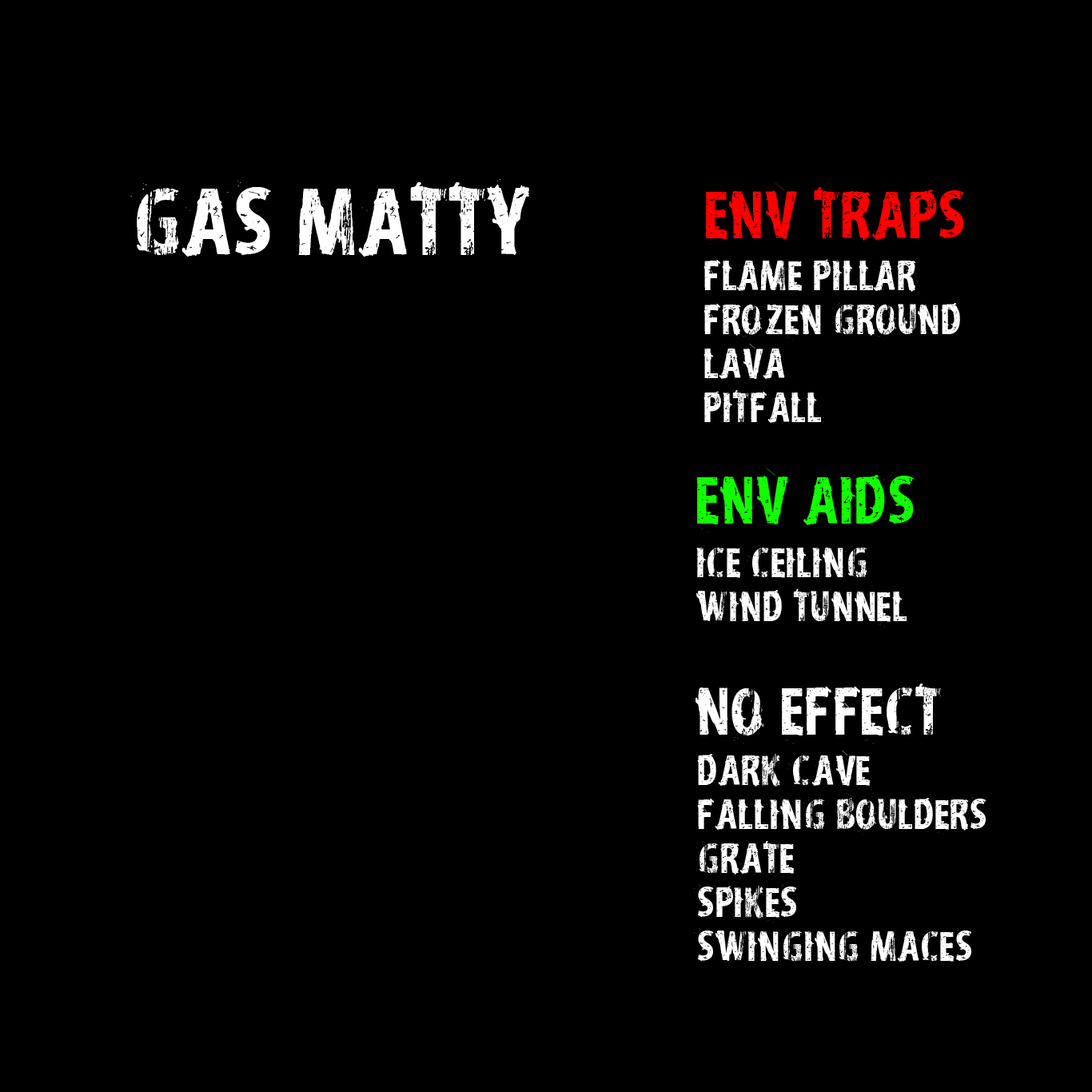
<style>
.page{position:relative;width:1092px;height:1092px;background:#000000}
.page>*{position:absolute;margin:0}
.t1{font:83.5px "vtksdistress";color:#ffffff}
.t2{font:58.4px "vtksdistress";color:#ff0000}
.t3{font:37.2px/44px "vtksdistress";color:#ffffff}
.t4{font:58.4px "vtksdistress";color:#12ff00}
.t5{font:37.2px/41.6px "vtksdistress";color:#ffffff}
.t6{font:58.4px "vtksdistress";color:#ffffff}
</style>
<div class="page">
<p class="t1" style="left:130px;top:179px;width:399px;height:78px">Gas matty</p>
<p class="t2" style="left:706px;top:183px;width:259px;height:64px">Env traps</p>
<p class="t3" style="left:703px;top:259px;width:257px;height:164px">flame pillar<br>Frozen ground<br>Lava<br>pitfall</p>
<p class="t4" style="left:697px;top:468px;width:218px;height:64px">ENV AIDs</p>
<p class="t5" style="left:696px;top:545px;width:211px;height:82px">ice ceiling<br><span class="t3">Wind tunnel</span></p>
<p class="t6" style="left:695px;top:683px;width:246px;height:60px">No effect</p>
<p class="t3" style="left:694px;top:751px;width:292px;height:215px">dark cave<br>falling boulders<br>grate<br>spikes<br>swinging maces</p>
</div>
